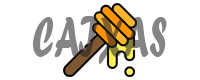
<style>
.page{position:relative;width:200px;height:80px;background:#ffffff}
.page>*{position:absolute;margin:0}
.t1{font:58.9px "ForteMT";color:#848484;scale:0.59 1}
</style>
<div class="page">
<p class="t1" style="left:32px;top:16px;width:135px;height:48px">CAIXAS</p>
</div>
